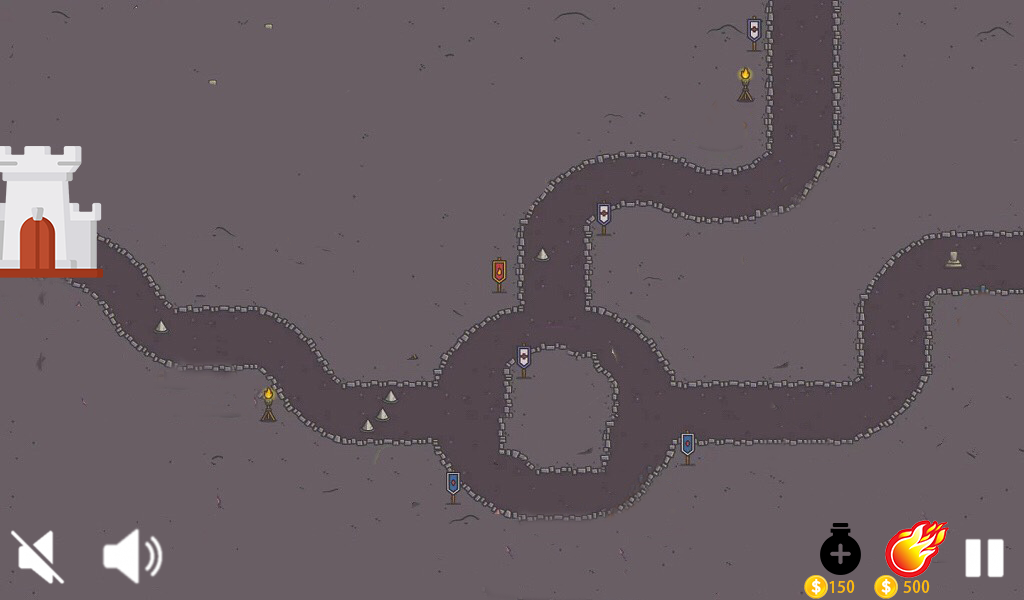
<style>
.page{position:relative;width:1024px;height:600px;background:#695e64}
.page>*{position:absolute;margin:0}
.t1{font:16px "AdobeFanHeitiStd-Bold";color:#ffbc06}
</style>
<div class="page">
<p class="t1" style="left:829px;top:580px;width:26px;height:13px">150</p>
<p class="t1" style="left:903px;top:580px;width:27px;height:13px">500</p>
</div>
